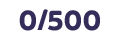
<style>
.page{position:relative;width:120px;height:40px;background:#ffffff}
.page>*{position:absolute;margin:0}
.t1{font:28px "CoHeadlineCorp-Bold";color:#342c59}
</style>
<div class="page">
<p class="t1" style="left:19px;top:9px;width:81px;height:22px">0/500</p>
</div>
